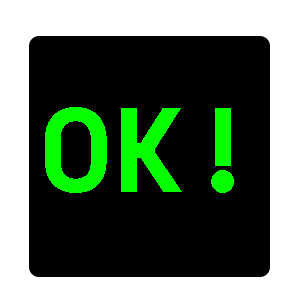
<style>
.page{position:relative;width:300px;height:300px;background:#000000}
.page>*{position:absolute;margin:0}
.t1{font:120px "SpaceMono-Bold";color:#06ff00}
</style>
<div class="page">
<p class="t1" style="left:45px;top:107px;width:189px;height:86px">OK!</p>
</div>
